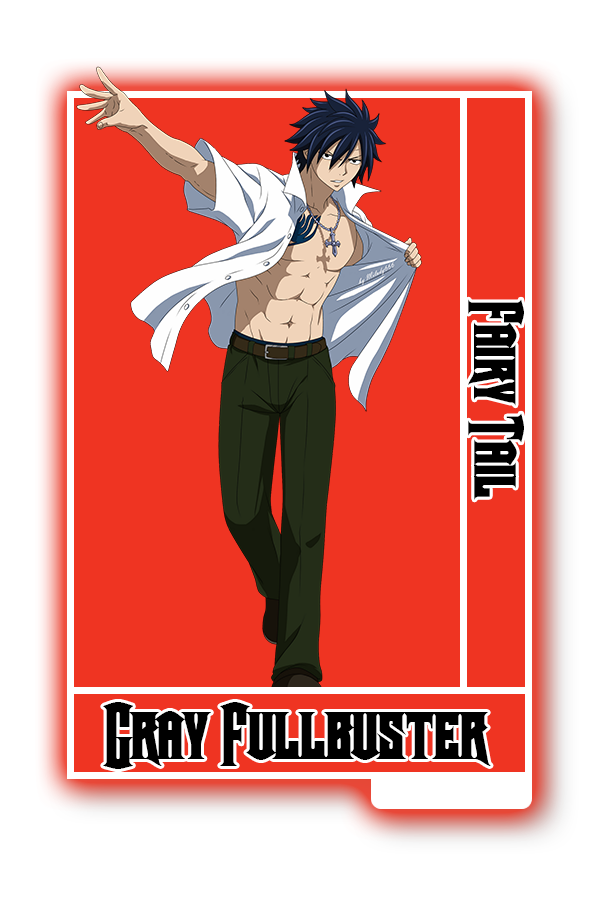
<style>
.page{position:relative;width:600px;height:900px;background:#ef3422}
.page>*{position:absolute;margin:0}
.t1{font:61.5px "Crown-Title";color:#000000}
.t2{font:70.1px "Crown-Title";color:#000000}
</style>
<div class="page">
<p class="t1" style="left:468px;top:299px;width:56px;height:201px;rotate:90deg">Fairy Tail</p>
<p class="t2" style="left:103px;top:702px;width:388px;height:67px">Gray Fullbuster</p>
</div>
